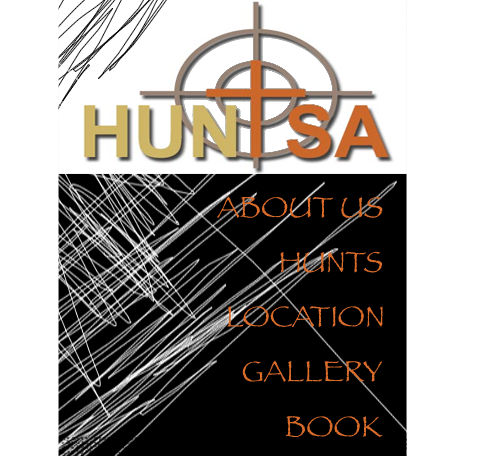
<style>
.page{position:relative;width:504px;height:456px;background:#ffffff}
.page>*{position:absolute;margin:0}
.t1{font:30px "Papyrus";color:#db6c2a}
</style>
<div class="page">
<p class="t1" style="left:217px;top:196px;width:166px;height:22px">ABOUT US</p>
<p class="t1" style="left:280px;top:251px;width:102px;height:22px">HUNTS</p>
<p class="t1" style="left:227px;top:306px;width:156px;height:21px">LOCATION</p>
<p class="t1" style="left:242px;top:360px;width:140px;height:22px">GALLERY</p>
<p class="t1" style="left:285px;top:416px;width:98px;height:21px">BOOK</p>
</div>
